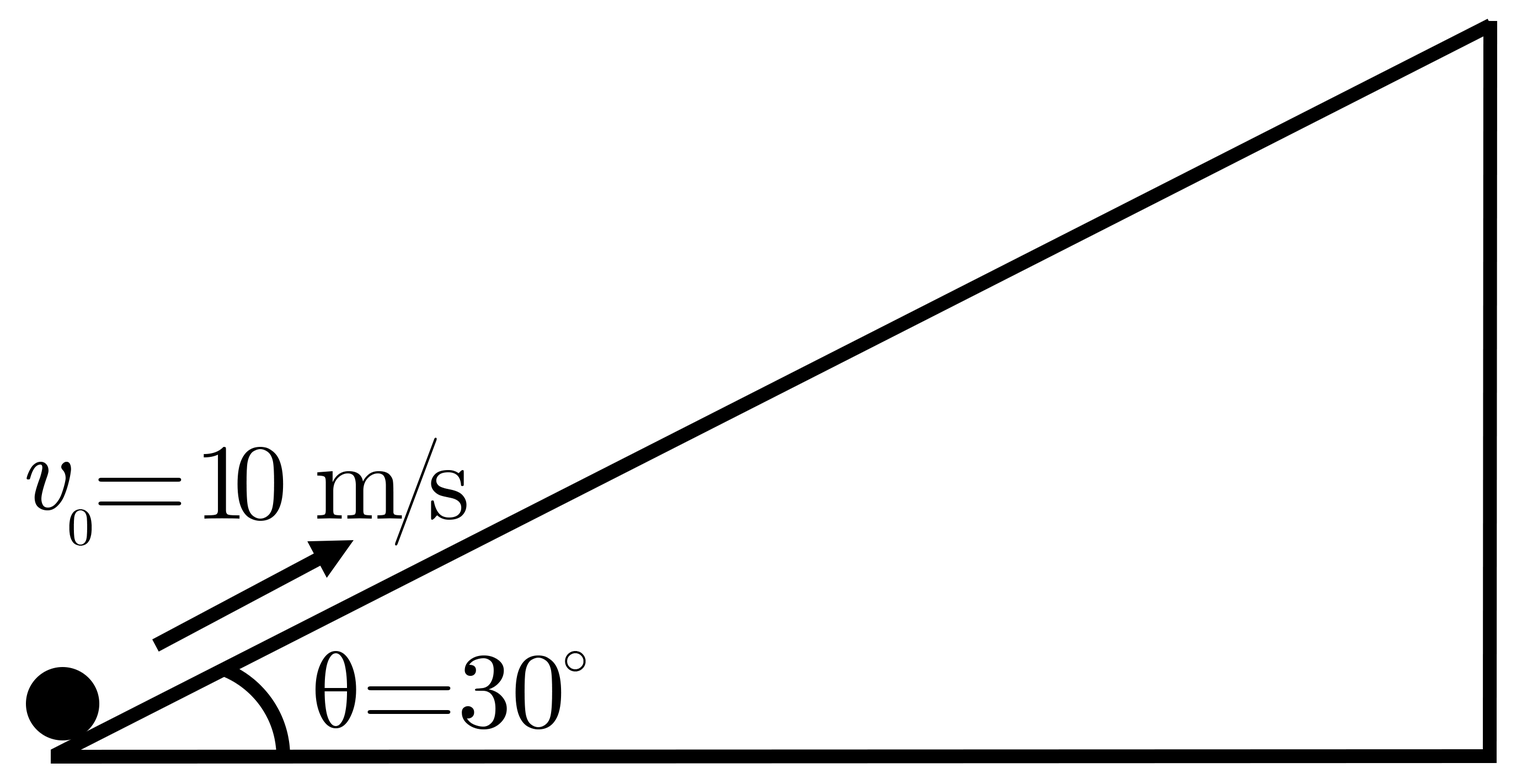
<style>
.page{position:relative;width:1522px;height:784px;background:#ffffff}
.page>*{position:absolute;margin:0}
.t1{font:108.1px "CMUSerif-Roman";letter-spacing:-0.14em;color:#000000}
.t2{font:108.1px "CMUSerif-Bold";letter-spacing:-0.14em;color:#000000}
.t3{font:108.1px "CMUSerif-Italic";color:#000000}
.t4{font:52.9px "CMUSerif-Roman";color:#000000}
.t5{font:108.1px "CMUSerif-Roman";color:#000000}
.t6{font:108.1px "CMUSerif-Bold";color:#000000}
</style>
<div class="page">
<p class="t1" style="left:98px;top:437px;width:369px;height:108px"><span class="t2">=</span> 10  m/s</p>
<p class="t3" style="left:26px;top:462px;width:45px;height:48px">v</p>
<p class="t4" style="left:69px;top:509px;width:23px;height:36px">0</p>
<p class="t5" style="left:315px;top:651px;width:246px;height:78px">θ<span class="t6">=</span>30</p>
<p class="t4" style="left:565px;top:651px;width:21px;height:20px">◦</p>
</div>
